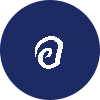
<style>
.page{position:relative;width:100px;height:100px;background:#1d2a63}
.page>*{position:absolute;margin:0}
.t1{font:85px "THCharmonman-Bold";color:#ffffff}
</style>
<div class="page">
<p class="t1" style="left:35px;top:36px;width:28px;height:33px">อ</p>
</div>
